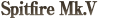
<style>
.page{position:relative;width:118px;height:18px;background:#ffffff}
.page>*{position:absolute;margin:0}
.t1{font:18px "RyuminPro-ExBold";letter-spacing:-0.06em;color:#4a3f32;font-weight:bold;scale:0.9 1}
</style>
<div class="page">
<p class="t1" style="left:1px;top:1px;width:97px;height:18px">Spitfire Mk.V</p>
</div>
